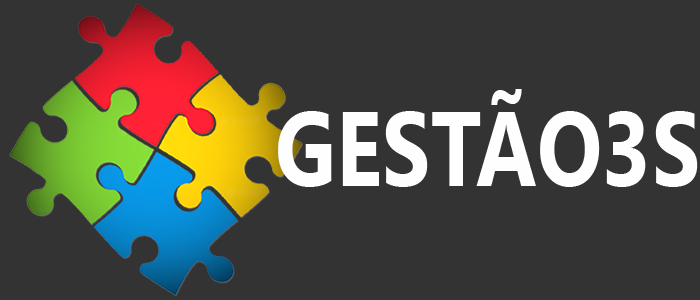
<style>
.page{position:relative;width:700px;height:300px;background:#333333}
.page>*{position:absolute;margin:0}
.t1{font:105.6px "LeelawadeeUI-Bold";color:#fffefe;scale:0.82 1}
</style>
<div class="page">
<p class="t1" style="left:278px;top:89px;width:420px;height:98px">GESTÃO3S</p>
</div>
